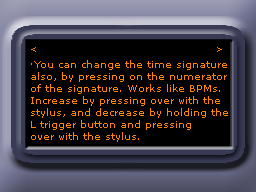
<style>
.page{position:relative;width:256px;height:192px;background:#000000}
.page>*{position:absolute;margin:0}
.t1{font:9px "MSReferenceSansSerif";color:#ff8400}
.t2{font:10px "MSReferenceSansSerif";color:#ff8400}
</style>
<div class="page">
<p class="t1" style="left:31px;top:47px;width:5px;height:5px">&lt;</p>
<p class="t1" style="left:217px;top:47px;width:5px;height:5px">&gt;</p>
<p class="t2" style="left:31px;top:60px;width:197px;height:82px">·You can change the time signature<br>also, by pressing on the numerator <br>of the signature. Works like BPMs.<br>Increase by pressing over with the <br>stylus, and decrease by holding the <br>L trigger button and pressing <br>over with the stylus.</p>
</div>
